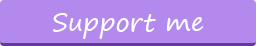
<style>
.page{position:relative;width:256px;height:46px;background:#b489ee}
.page>*{position:absolute;margin:0}
.t1{font:25px "SegoePrint";color:#ffffff}
</style>
<div class="page">
<p class="t1" style="left:53px;top:13px;width:151px;height:26px">Support me</p>
</div>
